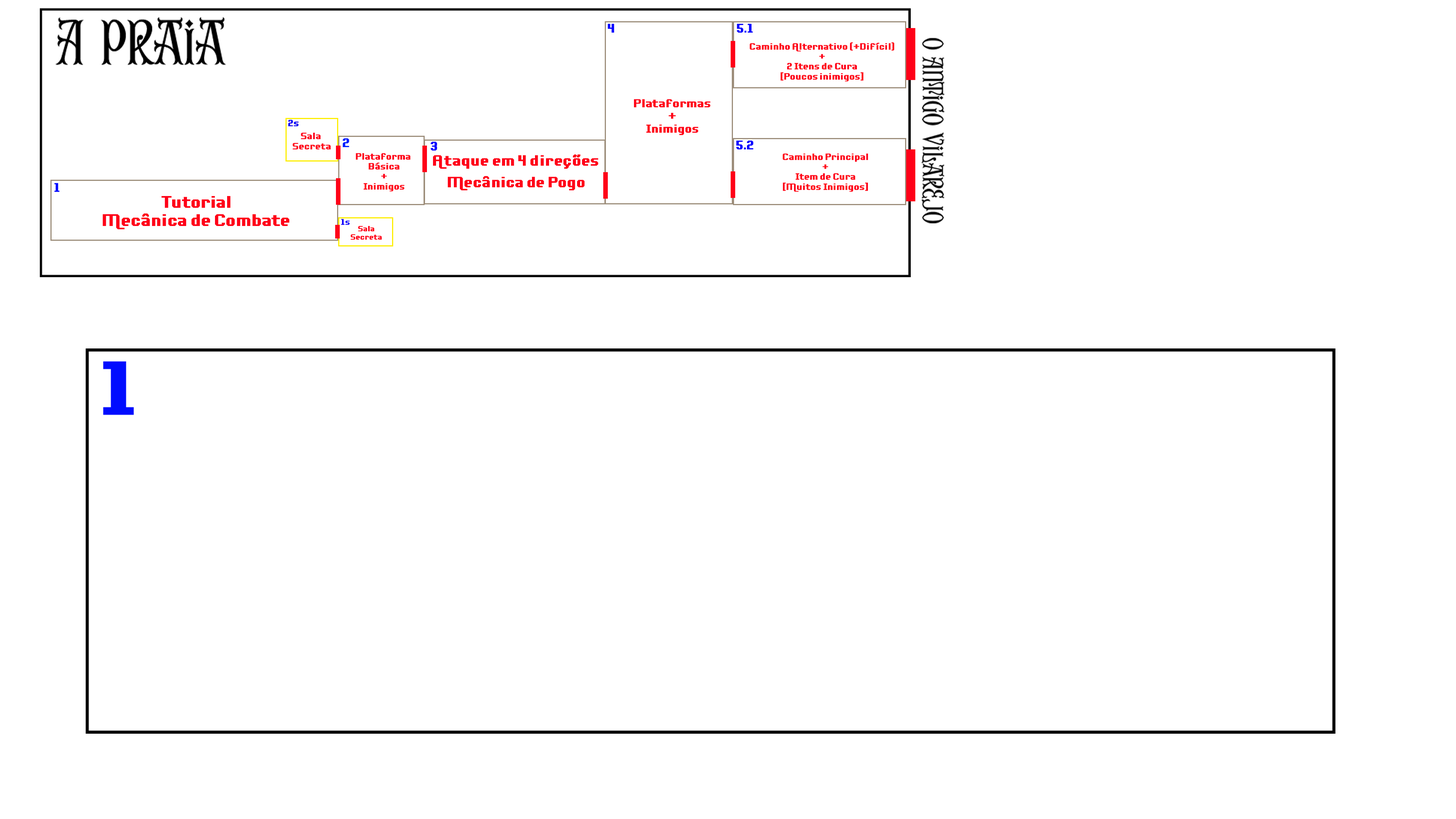
<style>
.page{position:relative;width:1456px;height:819px;background:#ffffff}
.page>*{position:absolute;margin:0}
.t1{font:11.4px "Adventure-ReQuest";color:#0600ff}
.t2{font:8.3px "Adventure-ReQuest";color:#ff0018}
.t3{font:10.5px "Adventure-ReQuest";color:#ff0018}
.t4{font:8.3px "Adventure-ReQuest";color:#0012ff}
.t5{font:11.4px "Adventure-ReQuest";color:#001eff}
.t6{font:13.6px "Adventure-ReQuest";color:#ff0018}
.t7{font:11.4px "Adventure-ReQuest";color:#000cff}
.t8{font:15.1px "Adventure-ReQuest";color:#ff0018}
.t9{font:7.6px "Adventure-ReQuest";color:#1200ff}
.t10{font:6.8px "Adventure-ReQuest";color:#ff0018}
</style>
<div class="page">
<p class="t1" style="left:608px;top:24px;width:6px;height:9px">4</p>
<p class="t1" style="left:737px;top:24px;width:16px;height:9px">5.1</p>
<p class="t2" style="left:750px;top:42px;width:144px;height:40px;text-align:center">Caminho Alternativo (+Difícil)<br>+<br>2 Itens de Cura<br>[Poucos inimigos]</p>
<p class="t3" style="left:634px;top:99px;width:77px;height:36px;text-align:center">Plataformas<br>+<br>Inimigos</p>
<p class="t4" style="left:288px;top:120px;width:11px;height:6px">2s</p>
<p class="t4" style="left:288px;top:120px;width:11px;height:6px">2s</p>
<p class="t2" style="left:293px;top:133px;width:38px;height:16px;text-align:center">Sala <br>Secreta</p>
<p class="t5" style="left:343px;top:138px;width:6px;height:9px">2</p>
<p class="t1" style="left:431px;top:141px;width:6px;height:10px">3</p>
<p class="t1" style="left:736px;top:140px;width:17px;height:9px">5.2</p>
<p class="t2" style="left:356px;top:153px;width:55px;height:38px;text-align:center">Plataforma <br>Básica<br>+<br>Inimigos</p>
<p class="t6" style="left:433px;top:154px;width:165px;height:15px">Ataque em 4 direções</p>
<p class="t2" style="left:783px;top:154px;width:85px;height:38px;text-align:center">Caminho Principal<br>+<br>Item de Cura<br>[Muitos Inimigos]</p>
<p class="t7" style="left:54px;top:183px;width:6px;height:9px">1</p>
<p class="t6" style="left:448px;top:176px;width:137px;height:14px">Mecânica de Pogo</p>
<p class="t8" style="left:103px;top:196px;width:186px;height:33px;text-align:center">Tutorial<br>Mecânica de Combate</p>
<p class="t9" style="left:341px;top:219px;width:9px;height:6px">1s</p>
<p class="t10" style="left:351px;top:226px;width:31px;height:14px;text-align:center">Sala<br>Secreta</p>
</div>
